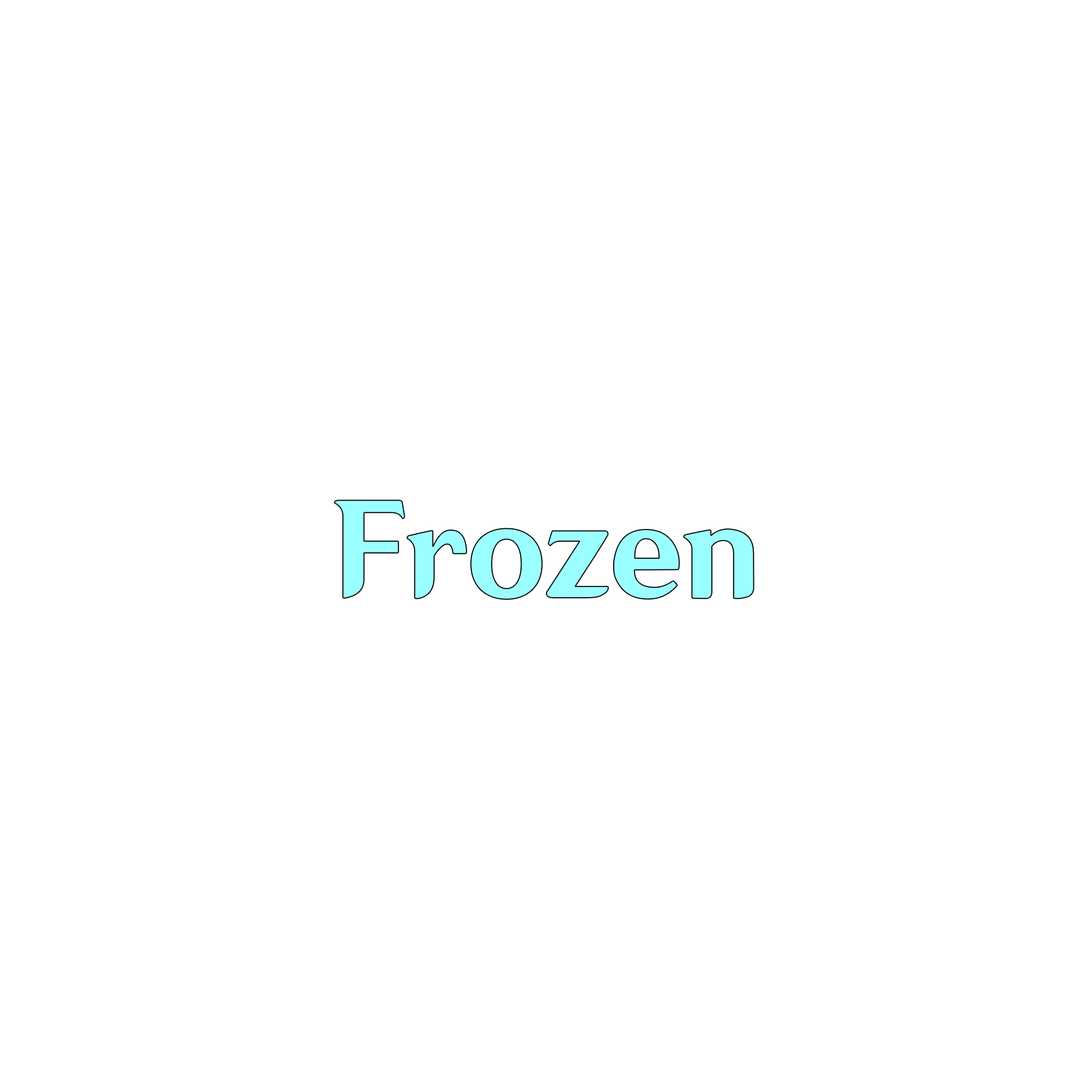
<style>
.page{position:relative;width:1092px;height:1092px;background:#ffffff}
.page>*{position:absolute;margin:0}
.t1{font:122.2px "Default_SC-85W";color:#9bffff}
</style>
<div class="page">
<p class="t1" style="left:334px;top:500px;width:420px;height:99px">Frozen</p>
</div>
